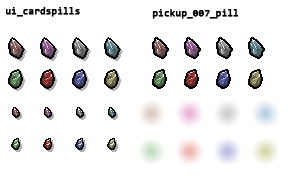
<style>
.page{position:relative;width:288px;height:176px;background:#ffffff}
.page>*{position:absolute;margin:0}
.t1{font:10px "Consolas";color:#000000;font-weight:bold}
</style>
<div class="page">
<p class="t1" style="left:6px;top:7px;width:74px;height:10px">ui_cardspills</p>
<p class="t1" style="left:152px;top:9px;width:87px;height:10px">pickup_007_pill</p>
</div>
